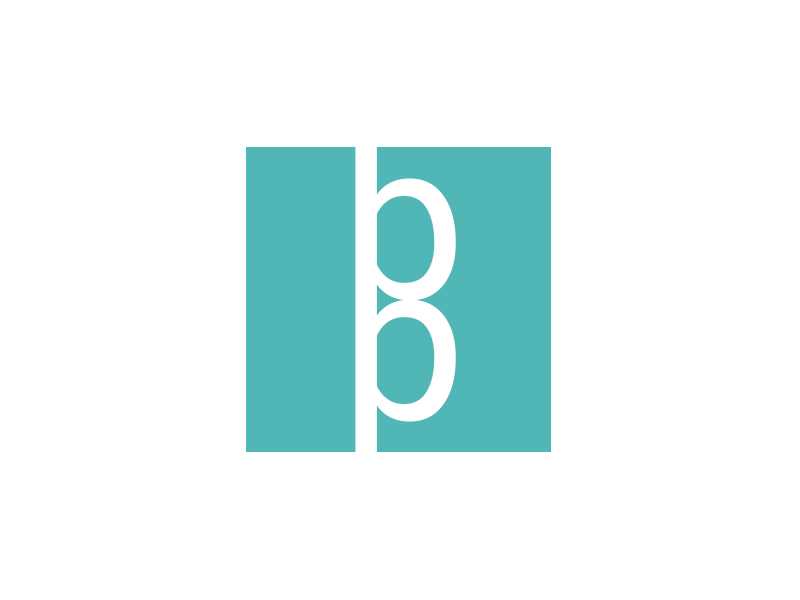
<style>
.page{position:relative;width:800px;height:600px;background:#ffffff}
.page>*{position:absolute;margin:0}
.t1{font:221.6px "Roboto-Regular";letter-spacing:0.01em;color:#ffffff}
</style>
<div class="page">
<p class="t1" style="left:355px;top:128px;width:101px;height:173px">b</p>
<p class="t1" style="left:355px;top:299px;width:101px;height:173px">b</p>
</div>
